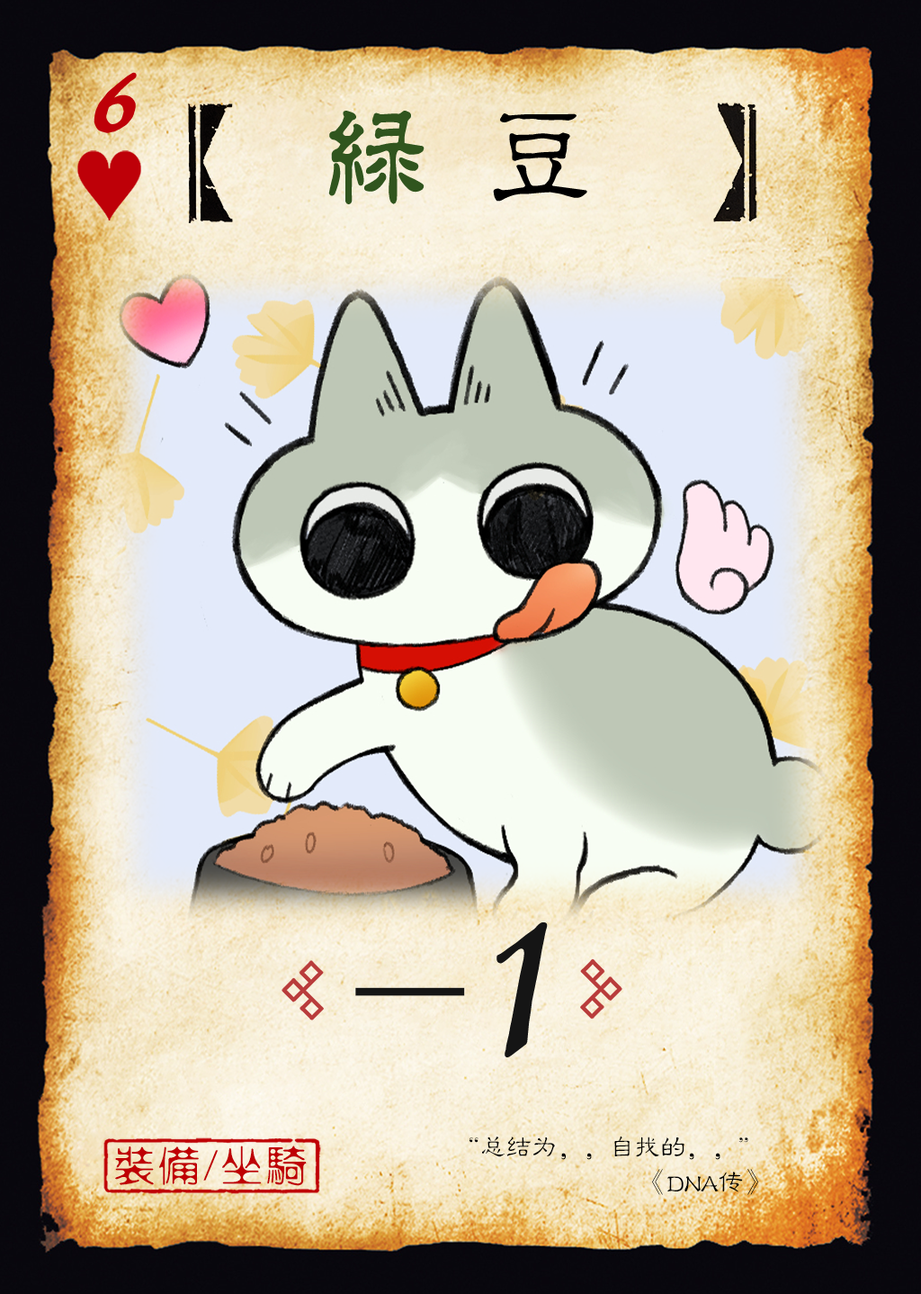
<style>
.page{position:relative;width:921px;height:1294px}
.page>*{position:absolute;margin:0}
.t1{font:110.9px "HYi1gf";color:#be0008;font-weight:bold;font-style:italic}
.t2{font:110.9px "¾­µä·±½ÇÁ¥ Regular";letter-spacing:0.45em;color:#30551e;font-weight:bold}
.t3{font:110.9px "¾­µä·±½ÇÁ¥ Regular";letter-spacing:0.45em;color:#000000}
.t4{font:258.3px "HYi1gf";color:#151515}
.t5{font:181.2px "Jxixinkai";color:#151515}
.t6{font:41.4px "FZXSHFW--GB1-0";letter-spacing:0.08em;color:#bf0004}
.t7{font:27.1px "FZLBJW--GB1-0";letter-spacing:-0.05em;color:#000000}
</style>
<div class="page">
<p class="t1" style="left:94px;top:72px;width:43px;height:61px">6</p>
<p class="t2" style="left:328px;top:111px;width:260px;height:93px">绿<span class="t3">豆</span></p>
<p class="t4" style="left:497px;top:922px;width:51px;height:135px">1</p>
<p class="t5" style="left:355px;top:987px;width:110px;height:9px">-</p>
<p class="t6" style="left:115px;top:1146px;width:192px;height:40px">装备/坐骑</p>
<p class="t7" style="left:470px;top:1136px;width:279px;height:24px">“总结为，，自找的，，”</p>
<p class="t7" style="left:652px;top:1169px;width:107px;height:26px">《DNA传》</p>
</div>
